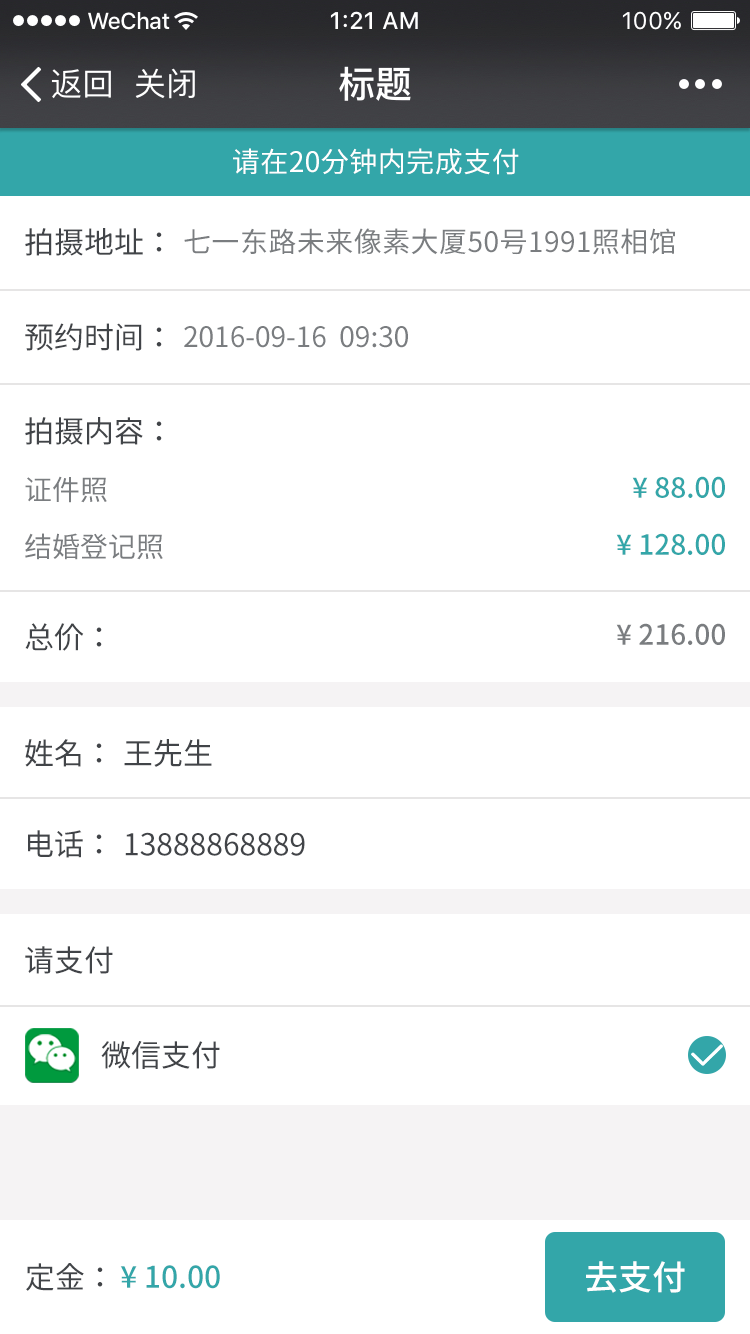
<style>
.page{position:relative;width:750px;height:1334px;background:#ffffff}
.page>*{position:absolute;margin:0}
.t1{font:28px "NotoSansCJK-Regular";letter-spacing:0.018em;color:#ffffff}
.t2{font:30px "NotoSansCJK-Regular";color:#414448}
.t3{font:28px "NotoSansCJK-Regular";letter-spacing:0.016em;color:#7a7d80}
.t4{font:28px "NotoSansCJK-Regular";color:#7a7d80}
.t5{font:28px "NotoSansCJK-Medium";color:#33a6a9}
.t6{font:28px "NotoSansCJK-Medium";color:#7a7d80}
.t7{font:30px "NotoSansCJK-Medium";color:#33a6a9}
.t8{font:34px "NotoSansCJK-Medium";color:#ffffff}
</style>
<div class="page">
<p class="t1" style="left:233px;top:148px;width:286px;height:27px">请在20分钟内完成支付</p>
<p class="t2" style="left:25px;top:228px;width:137px;height:28px">拍摄地址：</p>
<p class="t3" style="left:184px;top:228px;width:491px;height:27px">七一东路未来像素大厦50号1991照相馆</p>
<p class="t2" style="left:25px;top:323px;width:137px;height:28px">预约时间：</p>
<p class="t4" style="left:184px;top:326px;width:224px;height:22px">2016-09-16  09:30</p>
<p class="t2" style="left:25px;top:417px;width:137px;height:28px">拍摄内容：</p>
<p class="t4" style="left:25px;top:476px;width:82px;height:27px">证件照</p>
<p class="t5" style="left:632px;top:476px;width:93px;height:22px">¥ 88.00</p>
<p class="t4" style="left:25px;top:533px;width:138px;height:27px">结婚登记照</p>
<p class="t5" style="left:616px;top:533px;width:109px;height:22px">¥ 128.00</p>
<p class="t2" style="left:25px;top:623px;width:77px;height:28px">总价：</p>
<p class="t6" style="left:616px;top:623px;width:109px;height:22px">¥ 216.00</p>
<p class="t2" style="left:25px;top:739px;width:77px;height:28px">姓名：</p>
<p class="t2" style="left:124px;top:739px;width:88px;height:28px">王先生</p>
<p class="t2" style="left:28px;top:830px;width:74px;height:28px">电话：</p>
<p class="t2" style="left:125px;top:832px;width:180px;height:24px">13888868889</p>
<p class="t2" style="left:25px;top:946px;width:88px;height:28px">请支付</p>
<p class="t2" style="left:101px;top:1041px;width:119px;height:28px">微信支付</p>
<p class="t2" style="left:26px;top:1263px;width:77px;height:28px">定金：</p>
<p class="t7" style="left:120px;top:1265px;width:100px;height:24px">¥ 10.00</p>
<p class="t8" style="left:586px;top:1261px;width:99px;height:32px">去支付</p>
</div>
